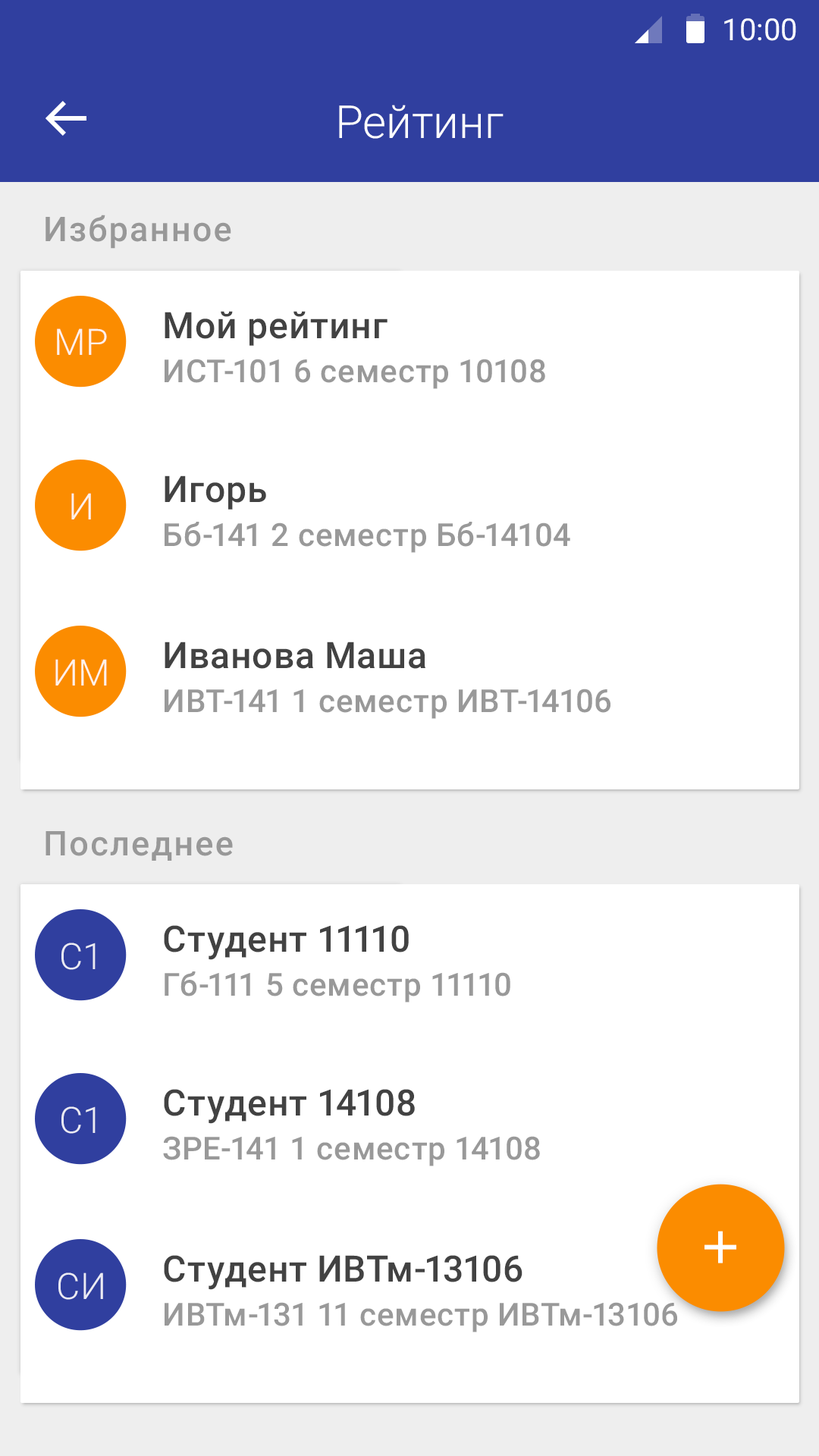
<style>
.page{position:relative;width:819px;height:1456px;background:#ffffff}
.page>*{position:absolute;margin:0}
.t1{font:30.3px "Roboto-Regular";color:#ffffff}
.t2{font:45.5px "Roboto-Light";color:#ffffff}
.t3{font:34.1px "Roboto-Medium";letter-spacing:0.05em;color:#989898}
.t4{font:36.5px "Roboto-Medium";letter-spacing:0.01em;color:#424242}
.t5{font:36.5px "Roboto-Light";letter-spacing:0.01em;color:#ffffff}
.t6{font:31.9px "Roboto-Medium";letter-spacing:0.01em;color:#999999}
</style>
<div class="page">
<p class="t1" style="left:724px;top:18px;width:72px;height:23px">10:00</p>
<p class="t2" style="left:339px;top:105px;width:165px;height:34px">Рейтинг</p>
<p class="t3" style="left:45px;top:215px;width:186px;height:34px">Избранное</p>
<p class="t4" style="left:165px;top:311px;width:223px;height:35px">Мой рейтинг</p>
<p class="t5" style="left:57px;top:328px;width:50px;height:27px;opacity:0.87">МР</p>
<p class="t6" style="left:165px;top:359px;width:380px;height:30px">ИСТ-101 6 семестр 10108</p>
<p class="t4" style="left:165px;top:475px;width:101px;height:35px">Игорь</p>
<p class="t5" style="left:71px;top:493px;width:20px;height:26px;opacity:0.87">И</p>
<p class="t6" style="left:165px;top:522px;width:405px;height:31px">Бб-141 2 семестр Бб-14104</p>
<p class="t4" style="left:165px;top:642px;width:260px;height:27px">Иванова Маша</p>
<p class="t5" style="left:55px;top:659px;width:52px;height:27px;opacity:0.87">ИМ</p>
<p class="t6" style="left:165px;top:689px;width:445px;height:30px">ИВТ-141 1 семестр ИВТ-14106</p>
<p class="t3" style="left:45px;top:831px;width:188px;height:30px">Последнее</p>
<p class="t4" style="left:164px;top:925px;width:245px;height:35px">Студент 11110</p>
<p class="t5" style="left:61px;top:943px;width:35px;height:27px;opacity:0.87">С1</p>
<p class="t6" style="left:165px;top:971px;width:345px;height:32px">Гб-111 5 семестр 11110</p>
<p class="t4" style="left:164px;top:1089px;width:251px;height:35px">Студент 14108</p>
<p class="t5" style="left:61px;top:1106px;width:35px;height:28px;opacity:0.87">С1</p>
<p class="t6" style="left:163px;top:1136px;width:377px;height:30px">ЗРЕ-141 1 семестр 14108</p>
<p class="t4" style="left:164px;top:1255px;width:358px;height:35px">Студент ИВТм-13106</p>
<p class="t5" style="left:58px;top:1272px;width:45px;height:28px;opacity:0.87">СИ</p>
<p class="t6" style="left:165px;top:1302px;width:512px;height:30px">ИВТм-131 11 семестр ИВТм-13106</p>
</div>
